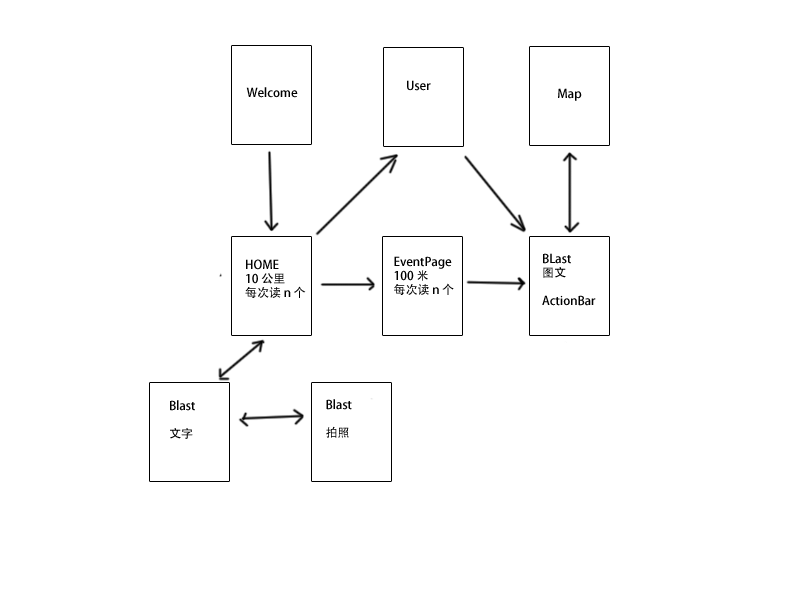
<style>
.page{position:relative;width:800px;height:600px;background:#ffffff}
.page>*{position:absolute;margin:0}
.t1{font:12px "AdobeHeitiStd-Regular";color:#000000}
.t2{font:12px/14px "AdobeHeitiStd-Regular";color:#000000}
</style>
<div class="page">
<p class="t1" style="left:246px;top:87px;width:52px;height:11px">Welcome</p>
<p class="t1" style="left:407px;top:80px;width:24px;height:11px">User</p>
<p class="t1" style="left:558px;top:88px;width:24px;height:13px">Map</p>
<p class="t2" style="left:394px;top:256px;width:60px;height:39px">EventPage<br>100 米<br>每次读 n 个</p>
<p class="t2" style="left:542px;top:253px;width:54px;height:53px">BLast<br>图文<br><br>ActionBar</p>
<p class="t2" style="left:245px;top:259px;width:61px;height:39px">HOME<br>10 公里<br>每次读 n 个</p>
<p class="t2" style="left:170px;top:400px;width:25px;height:39px">Blast<br><br>文字</p>
<p class="t2" style="left:326px;top:399px;width:26px;height:39px">Blast<br><br>拍照</p>
</div>
